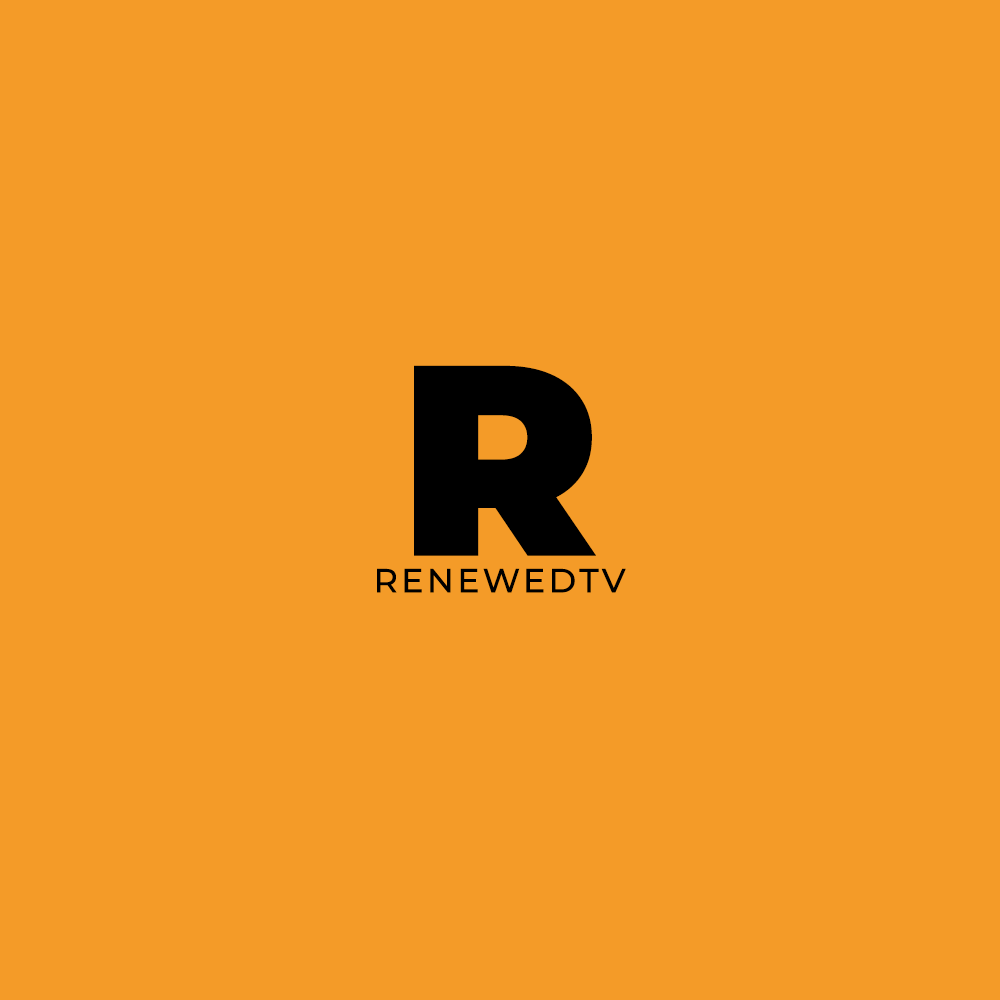
<style>
.page{position:relative;width:1000px;height:1000px;background:#f49b28}
.page>*{position:absolute;margin:0}
.t1{font:270.8px "MontserratRoman-Black";color:#000000;text-transform:uppercase}
.t2{font:33.3px "MontserratRoman-Medium";letter-spacing:0.1em;color:#000000;text-transform:uppercase}
</style>
<div class="page">
<p class="t1" style="left:414px;top:365px;width:182px;height:191px">r</p>
<p class="t2" style="left:377px;top:568px;width:249px;height:25px">RENEWEDTV</p>
</div>
